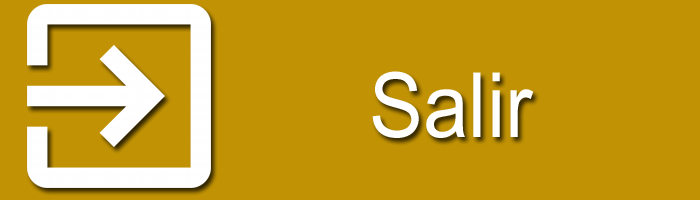
<style>
.page{position:relative;width:700px;height:200px;background:#c19304}
.page>*{position:absolute;margin:0}
.t1{font:90px "ArialMT";color:#ffffff;scale:0.9 1}
</style>
<div class="page">
<p class="t1" style="left:372px;top:71px;width:162px;height:67px">Salir</p>
</div>
